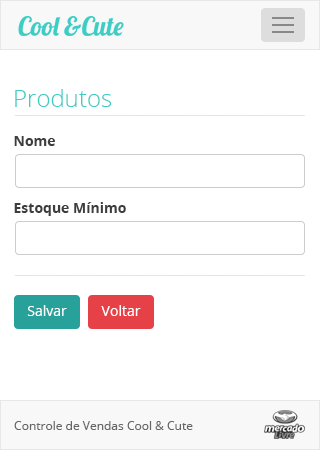
<style>
.page{position:relative;width:320px;height:450px;background:#ffffff}
.page>*{position:absolute;margin:0}
.t1{font:24px "OpenSans-Light";color:#3fcdc4}
.t2{font:14px "OpenSans-Bold";color:#3d3d3d}
.t3{font:14px "OpenSans";color:#ffffff}
.t4{font:12px "OpenSans";color:#666666}
</style>
<div class="page">
<p class="t1" style="left:15px;top:89px;width:97px;height:18px">Produtos</p>
<p class="t2" style="left:14px;top:136px;width:41px;height:10px">Nome</p>
<p class="t2" style="left:14px;top:202px;width:112px;height:14px">Estoque Mínimo</p>
<p class="t3" style="left:27px;top:305px;width:40px;height:11px">Salvar</p>
<p class="t3" style="left:101px;top:305px;width:40px;height:11px">Voltar</p>
<p class="t4" style="left:14px;top:421px;width:179px;height:9px">Controle de Vendas Cool &amp; Cute</p>
</div>
